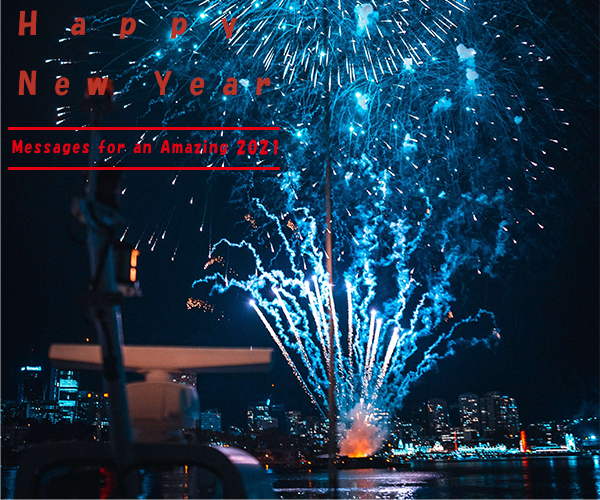
<style>
.page{position:relative;width:600px;height:500px}
.page>*{position:absolute;margin:0}
.t1{font:30px/60px "HGSSoeiKakupoptai";color:#b83328}
.t2{font:16.3px "HGSSoeiKakupoptai";color:#e60012;scale:0.89 1}
</style>
<div class="page">
<p class="t1" style="left:18px;top:10px;width:253px;height:86px;text-align:justify">Happy <br>New Year</p>
<p class="t2" style="left:12px;top:139px;width:266px;height:16px">Messages for an Amazing 2021</p>
</div>
